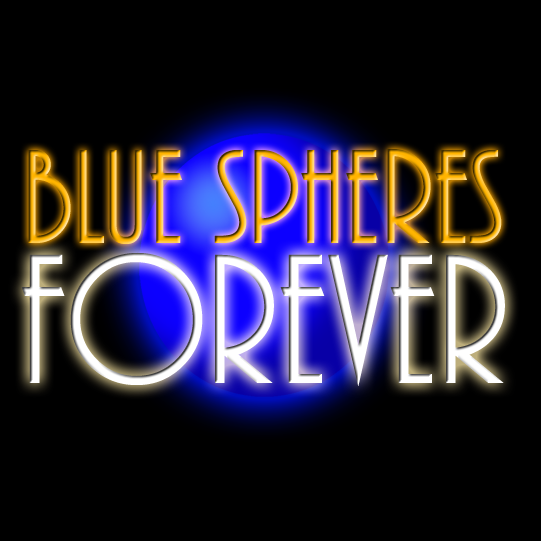
<style>
.page{position:relative;width:541px;height:541px;background:#000000}
.page>*{position:absolute;margin:0}
.t1{font:140.4px "ARBONNIE"}
</style>
<div class="page">
<p class="t1" style="left:28px;top:149px;width:474px;height:95px">BLUE spheres</p>
</div>
